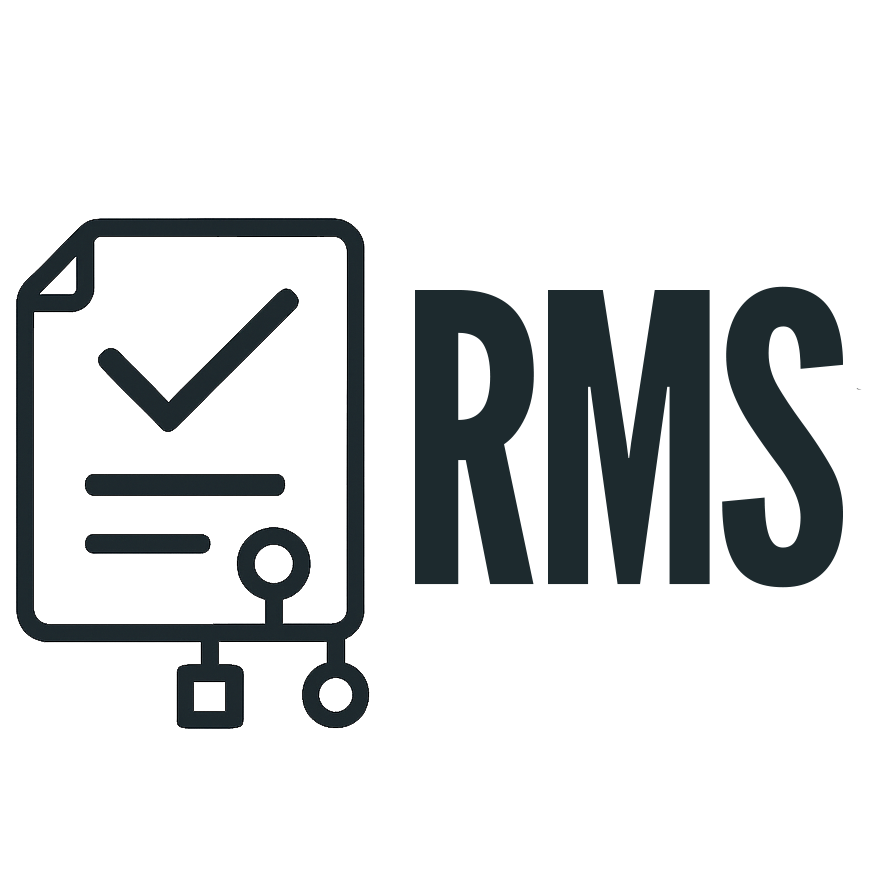
<style>
.page{position:relative;width:872px;height:871px;background:#ffffff}
.page>*{position:absolute;margin:0}
.t1{font:400px "LeagueGothic-Regular";letter-spacing:-0.025em;color:#1d2a2e}
</style>
<div class="page">
<p class="t1" style="left:415px;top:286px;width:428px;height:302px">RMS</p>
</div>
